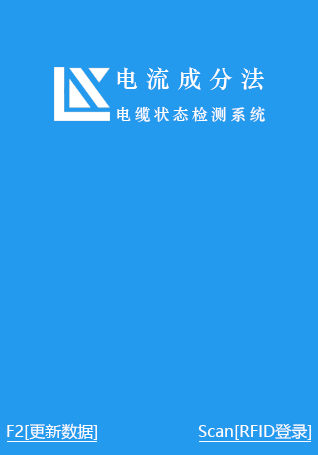
<style>
.page{position:relative;width:318px;height:455px;background:#239aee}
.page>*{position:absolute;margin:0}
.t1{font:24px "STZhongsong";letter-spacing:0.32em;color:#ffffff}
.t2{font:16px "STZhongsong";letter-spacing:0.2em;color:#ffffff}
.t3{font:16px "MicrosoftYaHeiUI";color:#ffffff}
</style>
<div class="page">
<p class="t1" style="left:117px;top:67px;width:147px;height:23px">电流成分法</p>
<p class="t2" style="left:117px;top:106px;width:148px;height:16px">电缆状态检测系统</p>
<p class="t3" style="left:7px;top:423px;width:90px;height:17px">F2[更新数据]</p>
<p class="t3" style="left:198px;top:423px;width:113px;height:17px">Scan[RFID登录]</p>
</div>
